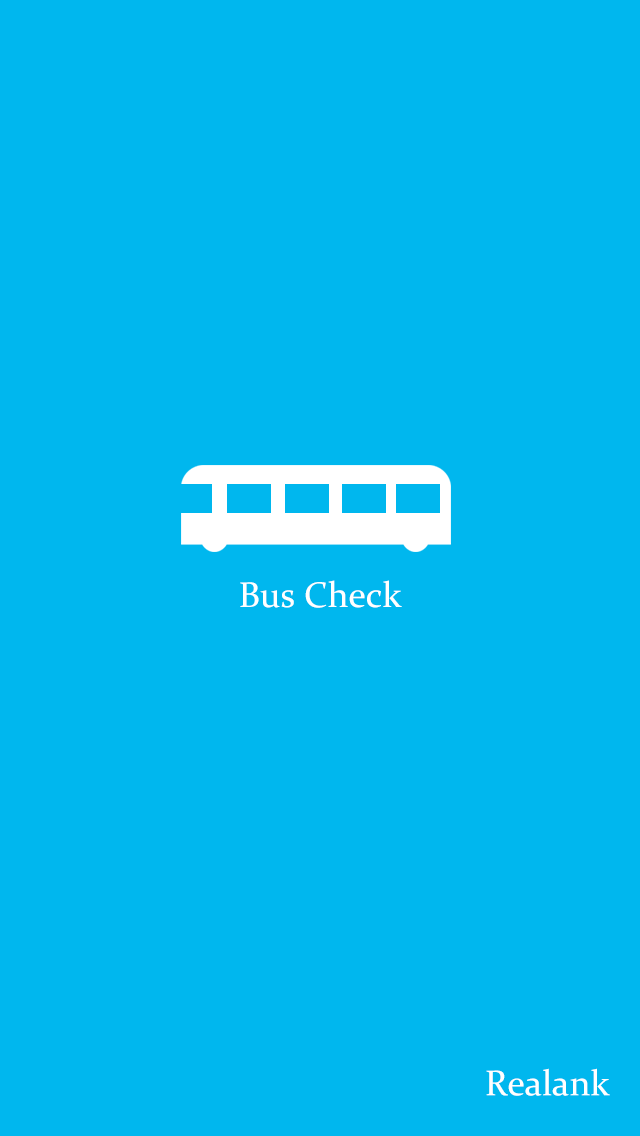
<style>
.page{position:relative;width:640px;height:1136px;background:#00b7ee}
.page>*{position:absolute;margin:0}
.t1{font:36px "Constantia";color:#ffffff}
</style>
<div class="page">
<p class="t1" style="left:240px;top:580px;width:162px;height:28px">Bus Check</p>
<p class="t1" style="left:486px;top:1068px;width:124px;height:28px">Realank</p>
</div>
